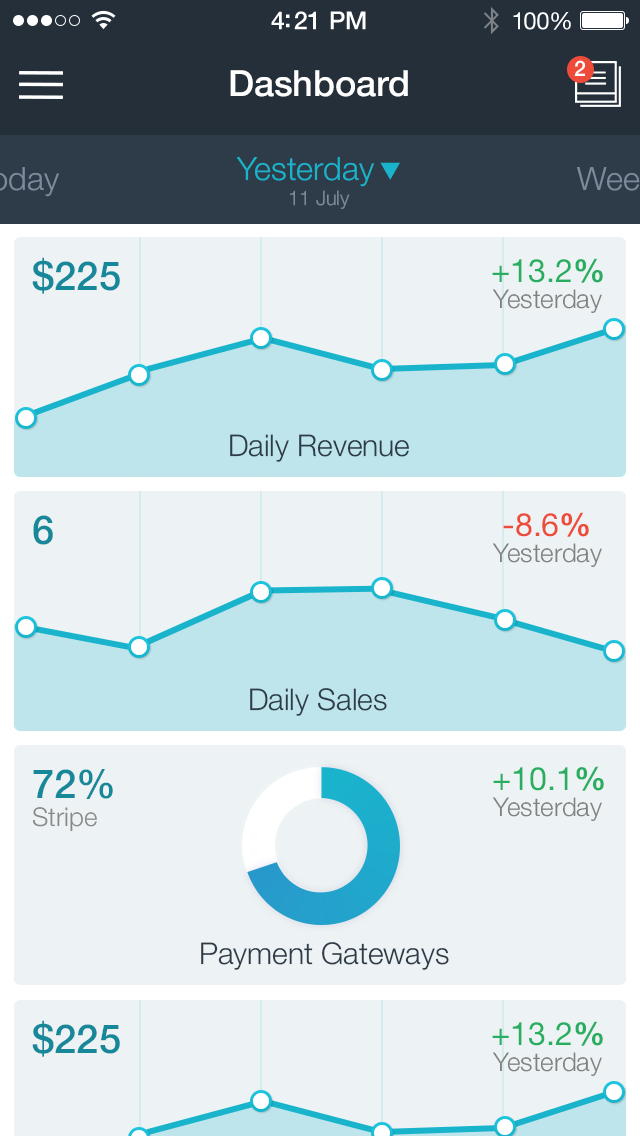
<style>
.page{position:relative;width:640px;height:1136px;background:#edf3f4}
.page>*{position:absolute;margin:0}
.t1{font:25px "HelveticaNeue-Medium";letter-spacing:-0.02em;color:#ffffff}
.t2{font:24px "HelveticaNeue";letter-spacing:-0.02em;color:#ffffff}
.t3{font:21.4px "HelveticaNeue-Medium";color:#ffffff}
.t4{font:36px "HelveticaNeue-Medium";color:#ffffff}
.t5{font:32.1px "HelveticaNeue-Light";color:#19b4cc}
.t6{font:20px "HelveticaNeue-Light";color:#7c8b9c}
.t7{font:40px "HelveticaNeue-Medium";color:#16889a}
.t8{font:32.1px "HelveticaNeue";color:#27ae60}
.t9{font:32.1px "HelveticaNeue-Bold";color:#27ae60}
.t10{font:25.9px "HelveticaNeue-Light";color:#808080}
.t11{font:30px "HelveticaNeue-Light";color:#2e3c49}
.t12{font:32.1px "HelveticaNeue";color:#ee4b3a}
.t13{font:32.1px "HelveticaNeue-Bold";color:#ee4b3a}
.t14{font:25.9px/28px "HelveticaNeue-Light";color:#898989}
.t15{font:40px/36px "HelveticaNeue-Medium";color:#16889a}
</style>
<div class="page">
<p class="t1" style="left:271px;top:11px;width:95px;height:19px">4:21 PM</p>
<p class="t2" style="left:513px;top:11px;width:58px;height:19px">100%</p>
<p class="t3" style="left:574px;top:60px;width:11px;height:16px">2</p>
<p class="t4" style="left:230px;top:70px;width:178px;height:27px">Dashboard</p>
<p class="t5" style="left:236px;top:157px;width:138px;height:30px">Yesterday</p>
<p class="t6" style="left:289px;top:190px;width:61px;height:19px">11 July</p>
<p class="t7" style="left:32px;top:257px;width:88px;height:37px">$225</p>
<p class="t8" style="left:492px;top:258px;width:111px;height:25px">+13.2<span class="t9">%</span></p>
<p class="t10" style="left:492px;top:289px;width:110px;height:24px">Yesterday</p>
<p class="t11" style="left:230px;top:434px;width:179px;height:28px">Daily Revenue</p>
<p class="t7" style="left:33px;top:515px;width:20px;height:30px">6</p>
<p class="t12" style="left:503px;top:512px;width:86px;height:25px">-8.6<span class="t13">%</span></p>
<p class="t10" style="left:492px;top:543px;width:110px;height:24px">Yesterday</p>
<p class="t11" style="left:250px;top:688px;width:137px;height:28px">Daily Sales</p>
<p class="t14" style="left:33px;top:769px;width:80px;height:62px"><span class="t15">72%<br></span>Stripe</p>
<p class="t8" style="left:493px;top:766px;width:111px;height:25px">+10.1<span class="t9">%</span></p>
<p class="t10" style="left:492px;top:797px;width:110px;height:24px">Yesterday</p>
<p class="t11" style="left:201px;top:942px;width:248px;height:28px">Payment Gateways</p>
<p class="t7" style="left:32px;top:1020px;width:88px;height:37px">$225</p>
<p class="t8" style="left:492px;top:1021px;width:111px;height:25px">+13.2<span class="t9">%</span></p>
<p class="t10" style="left:492px;top:1052px;width:110px;height:24px">Yesterday</p>
</div>
